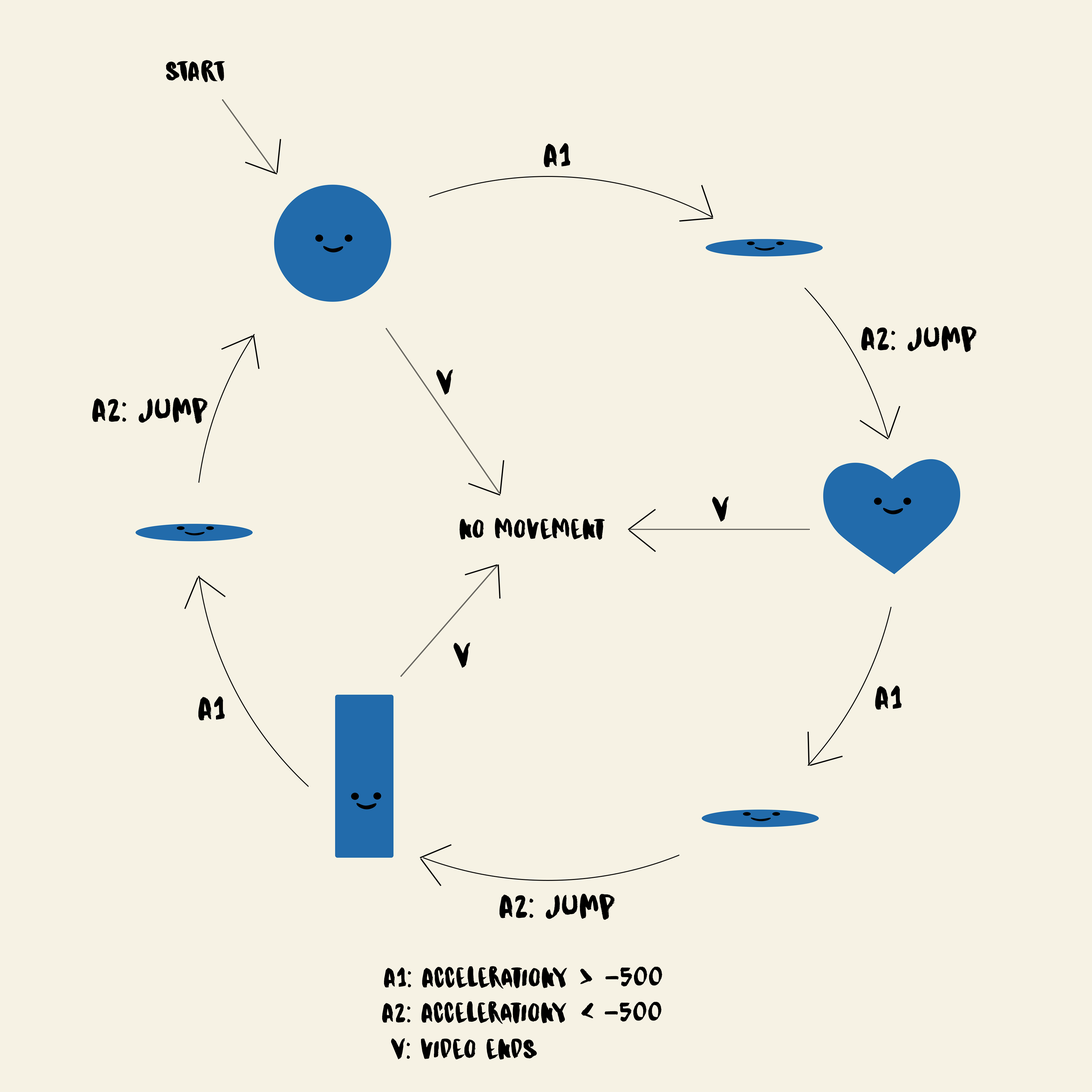
<style>
.page{position:relative;width:1092px;height:1092px;background:#f6f2e4}
.page>*{position:absolute;margin:0}
.t1{font:28.9px "DKKitsuneTail-Regular";letter-spacing:0.02em;color:#000000;scale:1.11 1}
.t2{font:34.7px "DKKitsuneTail-Regular";letter-spacing:0.02em;color:#000000;scale:1.11 1}
.t3{font:46.2px "Welcome-2019";letter-spacing:0.02em;color:#000000;scale:1.11 1}
</style>
<div class="page">
<p class="t1" style="left:166px;top:60px;width:59px;height:22px">START</p>
<p class="t2" style="left:544px;top:143px;width:26px;height:24px">A1</p>
<p class="t2" style="left:861px;top:326px;width:116px;height:26px">A2: JUMP</p>
<p class="t2" style="left:436px;top:370px;width:17px;height:25px">V</p>
<p class="t2" style="left:92px;top:397px;width:116px;height:27px">A2: JUMP</p>
<p class="t2" style="left:712px;top:497px;width:17px;height:25px">V</p>
<p class="t1" style="left:460px;top:518px;width:145px;height:22px">no movement</p>
<p class="t2" style="left:453px;top:643px;width:17px;height:25px">V</p>
<p class="t2" style="left:875px;top:685px;width:27px;height:25px">A1</p>
<p class="t2" style="left:198px;top:696px;width:27px;height:25px">A1</p>
<p class="t2" style="left:499px;top:893px;width:116px;height:27px">A2: JUMP</p>
<p class="t1" style="left:384px;top:966px;width:278px;height:23px">A1: AccelerationY    -500</p>
<p class="t3" style="left:580px;top:969px;width:12px;height:15px">&gt;</p>
<p class="t1" style="left:382px;top:1001px;width:280px;height:23px">A2: AccelerationY    -500</p>
<p class="t3" style="left:581px;top:1003px;width:12px;height:15px">&lt;</p>
<p class="t1" style="left:391px;top:1038px;width:146px;height:22px">V: video endS</p>
</div>
